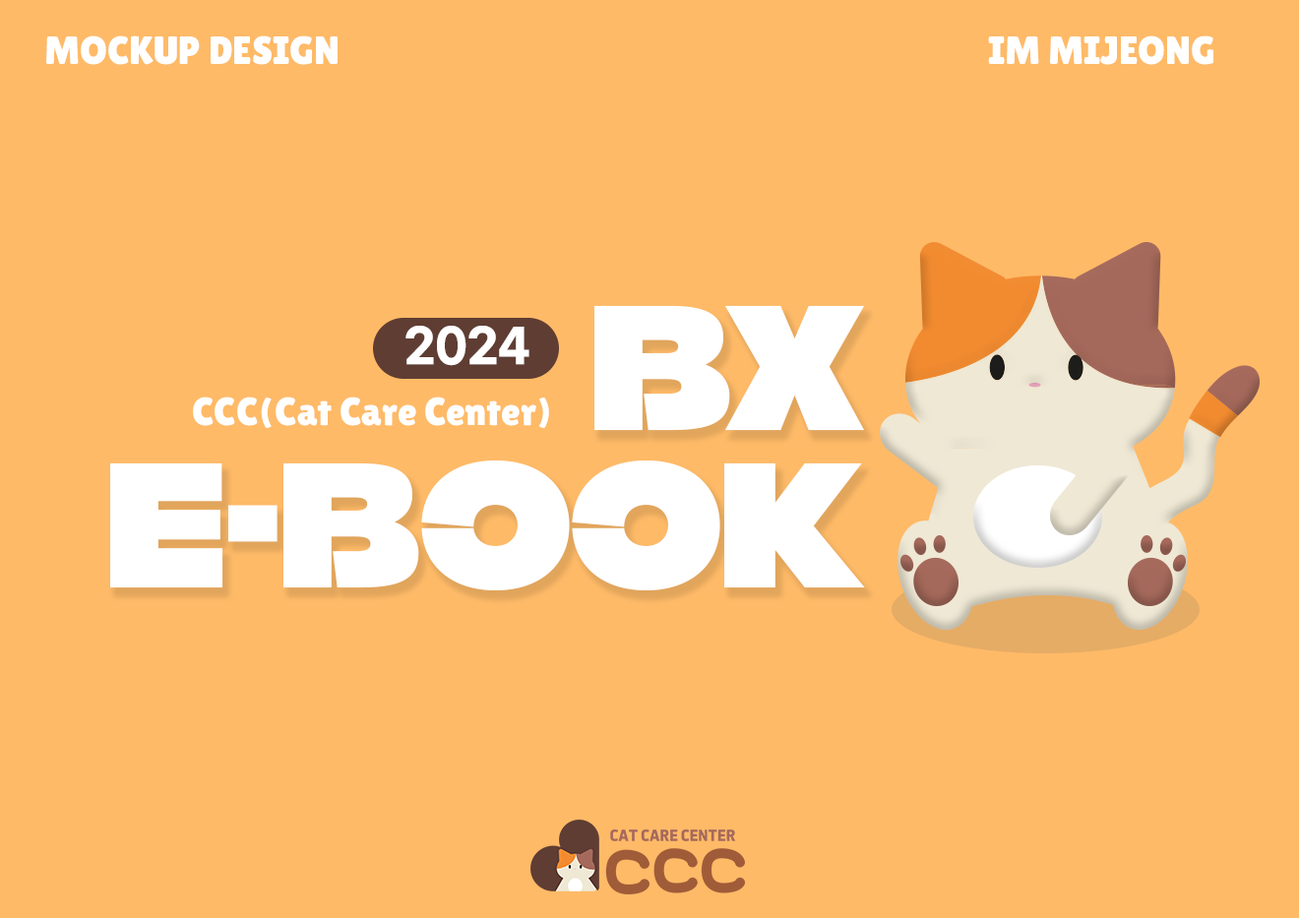
<style>
.page{position:relative;width:1299px;height:918px;background:#feba67}
.page>*{position:absolute;margin:0}
.t1{font:39.4px "LilitaOne";color:#ffffff}
.t2{font:147.6px/157.4px "Partial-Sans-KR";color:#ffffff}
.t3{font:46.2px "GmarketSansBold";color:#ffffff}
</style>
<div class="page">
<p class="t1" style="left:46px;top:35px;width:292px;height:30px">MOCKUP DESIGN</p>
<p class="t1" style="left:988px;top:35px;width:225px;height:30px">IM MIJEONG</p>
<p class="t2" style="left:110px;top:305px;width:755px;height:286px;text-align:right">BX<br>E-BOOK</p>
<p class="t3" style="left:405px;top:326px;width:124px;height:40px">2024</p>
<p class="t1" style="left:193px;top:397px;width:356px;height:31px">CCC(Cat Care Center)</p>
</div>
